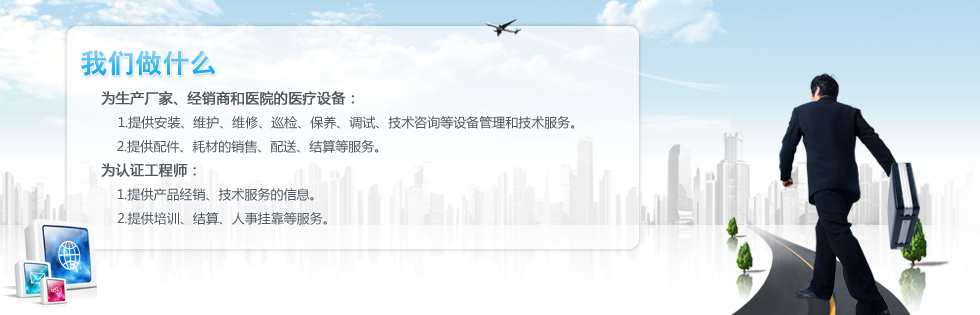
<style>
.page{position:relative;width:980px;height:315px}
.page>*{position:absolute;margin:0}
.t1{font:26px "-G-h-e-i-0-1-h";letter-spacing:0.05em}
.t2{font:13px/24px "MicrosoftYaHei";color:#4c575e}
.t3{font:14px/24px "MicrosoftYaHei";color:#4c575e;font-weight:bold}
</style>
<div class="page">
<p class="t1" style="left:81px;top:50px;width:135px;height:26px">我们做什么</p>
<p class="t2" style="left:101px;top:91px;width:474px;height:134px"><span class="t3">为生产厂家、经销商和医院的医疗设备：<br>    </span>1.提供安装、维护、维修、巡检、保养、调试、技术咨询等设备管理和技术服务。<br>    2.提供配件、耗材的销售、配送、结算等服务。<br><span class="t3">为认证工程师：<br>     </span>1.提供产品经销、技术服务的信息。<br>     2.提供培训、结算、人事挂靠等服务。</p>
</div>
